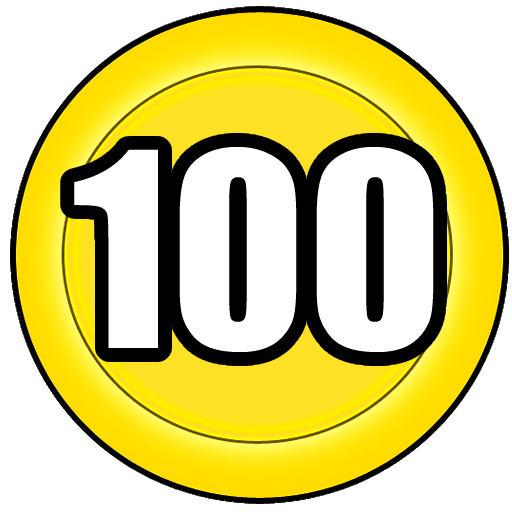
<style>
.page{position:relative;width:512px;height:512px;background:#ffffff}
.page>*{position:absolute;margin:0}
.t1{font:250px "Impact";letter-spacing:0.012em;color:#ffffff}
</style>
<div class="page">
<p class="t1" style="left:74px;top:146px;width:360px;height:206px">100</p>
</div>
